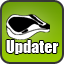
<style>
.page{position:relative;width:64px;height:64px}
.page>*{position:absolute;margin:0}
.t1{font:16px "Impact";color:#ffffff}
</style>
<div class="page">
<p class="t1" style="left:6px;top:40px;width:53px;height:14px">Updater</p>
</div>
